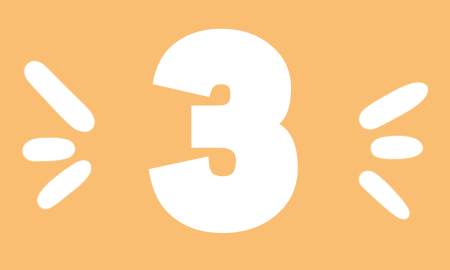
<style>
.page{position:relative;width:450px;height:270px;background:#f9be71}
.page>*{position:absolute;margin:0}
.t1{font:476.7px "Boldfinger";color:#ffffff}
</style>
<div class="page">
<p class="t1" style="left:148px;top:28px;width:150px;height:205px">3</p>
</div>
